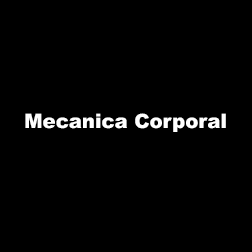
<style>
.page{position:relative;width:252px;height:252px;background:#000000}
.page>*{position:absolute;margin:0}
.t1{font:19.7px "Arial-Black";color:#ffffff}
</style>
<div class="page">
<p class="t1" style="left:25px;top:113px;width:201px;height:19px">Mecanica Corporal</p>
</div>
